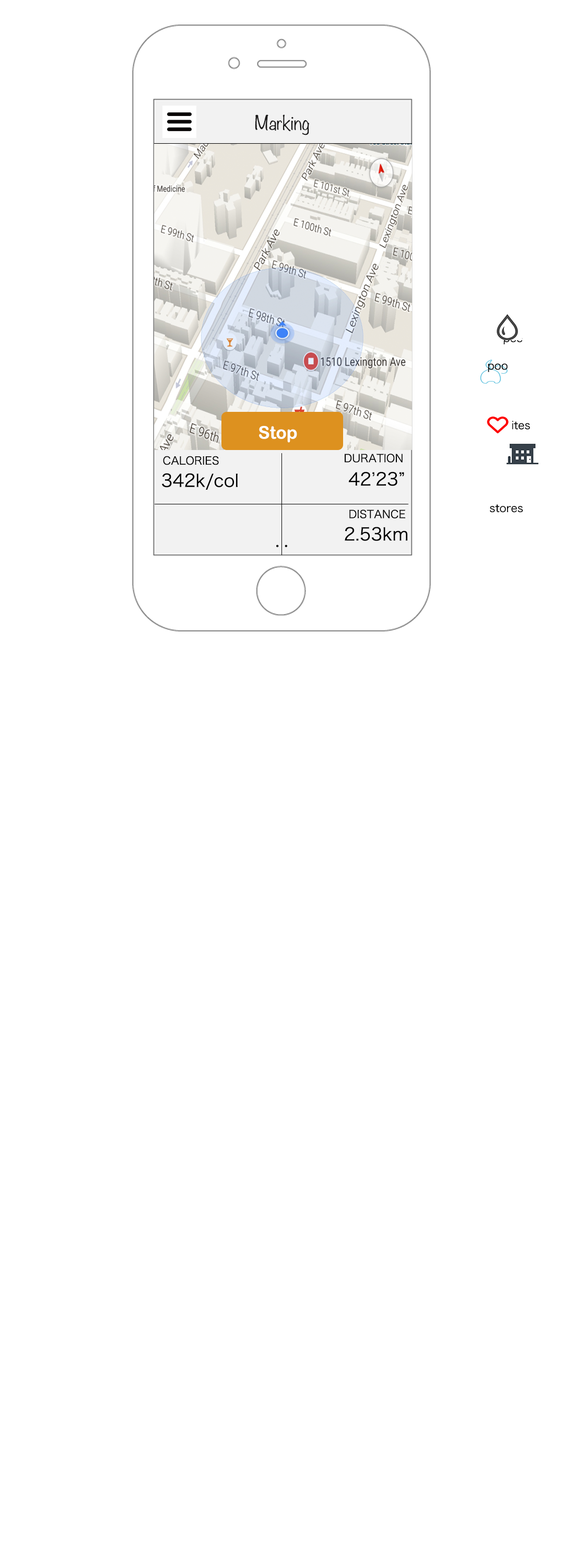
<style>
.page{position:relative;width:564px;height:1568px;background:#ffffff}
.page>*{position:absolute;margin:0}
.t1{font:17.4px "Noteworthy-Light";color:#191818}
.t2{font:10.9px "HiraKakuProN-W3"}
.t3{font:10.9px "HiraKakuProN-W3";color:#000000}
.t4{font:17.4px "ArialRoundedMTBold";color:#ffffff}
.t5{font:17.4px "HiraKakuProN-W3";color:#000000}
</style>
<div class="page">
<p class="t1" style="left:255px;top:114px;width:54px;height:21px">Marking</p>
<p class="t2" style="left:504px;top:336px;width:19px;height:8px">pee</p>
<p class="t3" style="left:488px;top:363px;width:20px;height:9px">poo</p>
<p class="t4" style="left:259px;top:425px;width:38px;height:18px">Stop</p>
<p class="t2" style="left:483px;top:421px;width:48px;height:9px">favorites</p>
<p class="t3" style="left:163px;top:456px;width:56px;height:9px">CALORIES</p>
<p class="t3" style="left:345px;top:454px;width:58px;height:9px">DURATION</p>
<p class="t5" style="left:162px;top:473px;width:76px;height:17px">342k/col</p>
<p class="t5" style="left:349px;top:471px;width:56px;height:15px">42’23”</p>
<p class="t3" style="left:350px;top:510px;width:56px;height:8px">DISTANCE</p>
<p class="t3" style="left:490px;top:504px;width:33px;height:9px">stores</p>
<p class="t5" style="left:345px;top:527px;width:63px;height:14px">2.53km</p>
<p class="t5" style="left:276px;top:545px;width:11px;height:2px">‥</p>
</div>
